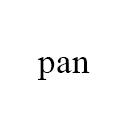
<style>
.page{position:relative;width:128px;height:128px;background:#ffffff}
.page>*{position:absolute;margin:0}
.t1{font:35.4px "TimesNewRomanPSMT";color:#000000}
</style>
<div class="page">
<p class="t1" style="left:38px;top:57px;width:52px;height:23px">pan</p>
</div>
